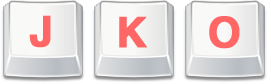
<style>
.page{position:relative;width:271px;height:84px}
.page>*{position:absolute;margin:0}
.t1{font:42px "Helvetica-Bold";color:#ff6666;font-weight:bold}
</style>
<div class="page">
<p class="t1" style="left:29px;top:15px;width:22px;height:33px">J</p>
<p class="t1" style="left:119px;top:16px;width:28px;height:32px">K</p>
<p class="t1" style="left:209px;top:16px;width:31px;height:33px">O</p>
</div>
